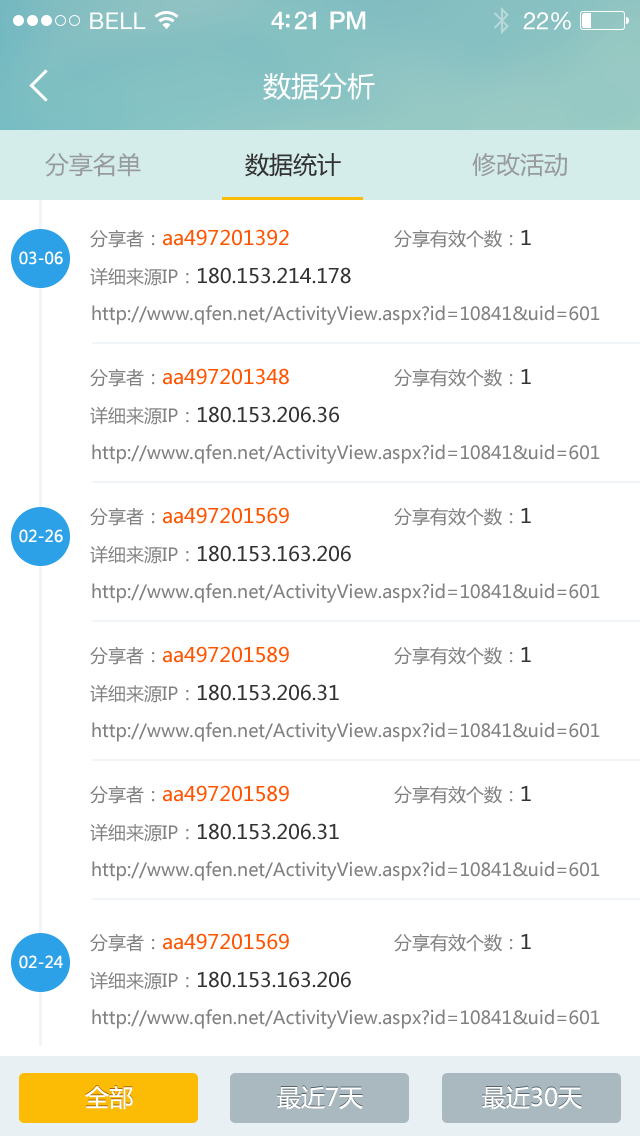
<style>
.page{position:relative;width:640px;height:1136px;background:#ffffff}
.page>*{position:absolute;margin:0}
.t1{font:23px "HelveticaNeue";letter-spacing:0.02em;color:#ffffff}
.t2{font:25px "HelveticaNeue-Medium";letter-spacing:-0.02em;color:#ffffff}
.t3{font:24px "HelveticaNeue";letter-spacing:-0.02em;color:#ffffff}
.t4{font:28px "MicrosoftYaHei";color:#ffffff}
.t5{font:24px "MicrosoftYaHei";color:#979b9d}
.t6{font:24px "MicrosoftYaHei";color:#333333}
.t7{font:20px "MicrosoftYaHei";color:#ff5400}
.t8{font:18px "MicrosoftYaHei";color:#818181}
.t9{font:20px "MicrosoftYaHei";color:#333333}
.t10{font:16px "MicrosoftYaHei";color:#ffffff}
.t11{font:24px "MicrosoftYaHei";color:#ffffff}
</style>
<div class="page">
<p class="t1" style="left:90px;top:12px;width:56px;height:17px">BELL</p>
<p class="t2" style="left:271px;top:11px;width:95px;height:19px">4:21 PM</p>
<p class="t3" style="left:523px;top:12px;width:48px;height:18px">22%</p>
<p class="t4" style="left:263px;top:72px;width:112px;height:28px">数据分析</p>
<p class="t5" style="left:45px;top:152px;width:96px;height:25px">分享名单</p>
<p class="t6" style="left:245px;top:153px;width:96px;height:24px">数据统计</p>
<p class="t5" style="left:472px;top:153px;width:95px;height:24px">修改活动</p>
<p class="t7" style="left:90px;top:229px;width:199px;height:19px"><span class="t8">分享者：</span>aa497201392</p>
<p class="t8" style="left:394px;top:229px;width:137px;height:19px">分享有效个数：<span class="t9">1</span></p>
<p class="t10" style="left:19px;top:251px;width:44px;height:14px">03-06</p>
<p class="t9" style="left:90px;top:267px;width:261px;height:19px"><span class="t8">详细来源IP：</span>180.153.214.178</p>
<p class="t8" style="left:92px;top:305px;width:508px;height:20px">http://www.qfen.net/ActivityView.aspx?id=10841&amp;uid=601</p>
<p class="t7" style="left:90px;top:368px;width:199px;height:19px"><span class="t8">分享者：</span>aa497201348</p>
<p class="t8" style="left:394px;top:368px;width:137px;height:19px">分享有效个数：<span class="t9">1</span></p>
<p class="t9" style="left:90px;top:406px;width:249px;height:19px"><span class="t8">详细来源IP：</span>180.153.206.36</p>
<p class="t8" style="left:92px;top:444px;width:508px;height:20px">http://www.qfen.net/ActivityView.aspx?id=10841&amp;uid=601</p>
<p class="t7" style="left:90px;top:507px;width:199px;height:19px"><span class="t8">分享者：</span>aa497201569</p>
<p class="t8" style="left:394px;top:507px;width:137px;height:19px">分享有效个数：<span class="t9">1</span></p>
<p class="t10" style="left:19px;top:529px;width:44px;height:14px">02-26</p>
<p class="t9" style="left:90px;top:545px;width:261px;height:19px"><span class="t8">详细来源IP：</span>180.153.163.206</p>
<p class="t8" style="left:92px;top:583px;width:508px;height:20px">http://www.qfen.net/ActivityView.aspx?id=10841&amp;uid=601</p>
<p class="t7" style="left:90px;top:646px;width:199px;height:19px"><span class="t8">分享者：</span>aa497201589</p>
<p class="t8" style="left:394px;top:646px;width:137px;height:19px">分享有效个数：<span class="t9">1</span></p>
<p class="t9" style="left:90px;top:684px;width:249px;height:19px"><span class="t8">详细来源IP：</span>180.153.206.31</p>
<p class="t8" style="left:92px;top:722px;width:508px;height:20px">http://www.qfen.net/ActivityView.aspx?id=10841&amp;uid=601</p>
<p class="t7" style="left:90px;top:785px;width:199px;height:19px"><span class="t8">分享者：</span>aa497201589</p>
<p class="t8" style="left:394px;top:785px;width:137px;height:19px">分享有效个数：<span class="t9">1</span></p>
<p class="t9" style="left:90px;top:823px;width:249px;height:19px"><span class="t8">详细来源IP：</span>180.153.206.31</p>
<p class="t8" style="left:92px;top:861px;width:508px;height:20px">http://www.qfen.net/ActivityView.aspx?id=10841&amp;uid=601</p>
<p class="t7" style="left:90px;top:933px;width:199px;height:19px"><span class="t8">分享者：</span>aa497201569</p>
<p class="t8" style="left:394px;top:933px;width:137px;height:19px">分享有效个数：<span class="t9">1</span></p>
<p class="t10" style="left:19px;top:955px;width:44px;height:14px">02-24</p>
<p class="t9" style="left:90px;top:971px;width:261px;height:19px"><span class="t8">详细来源IP：</span>180.153.163.206</p>
<p class="t8" style="left:92px;top:1009px;width:508px;height:20px">http://www.qfen.net/ActivityView.aspx?id=10841&amp;uid=601</p>
<p class="t11" style="left:85px;top:1085px;width:48px;height:25px">全部</p>
<p class="t11" style="left:277px;top:1086px;width:86px;height:24px">最近7天</p>
<p class="t11" style="left:482px;top:1086px;width:100px;height:24px">最近30天</p>
</div>
